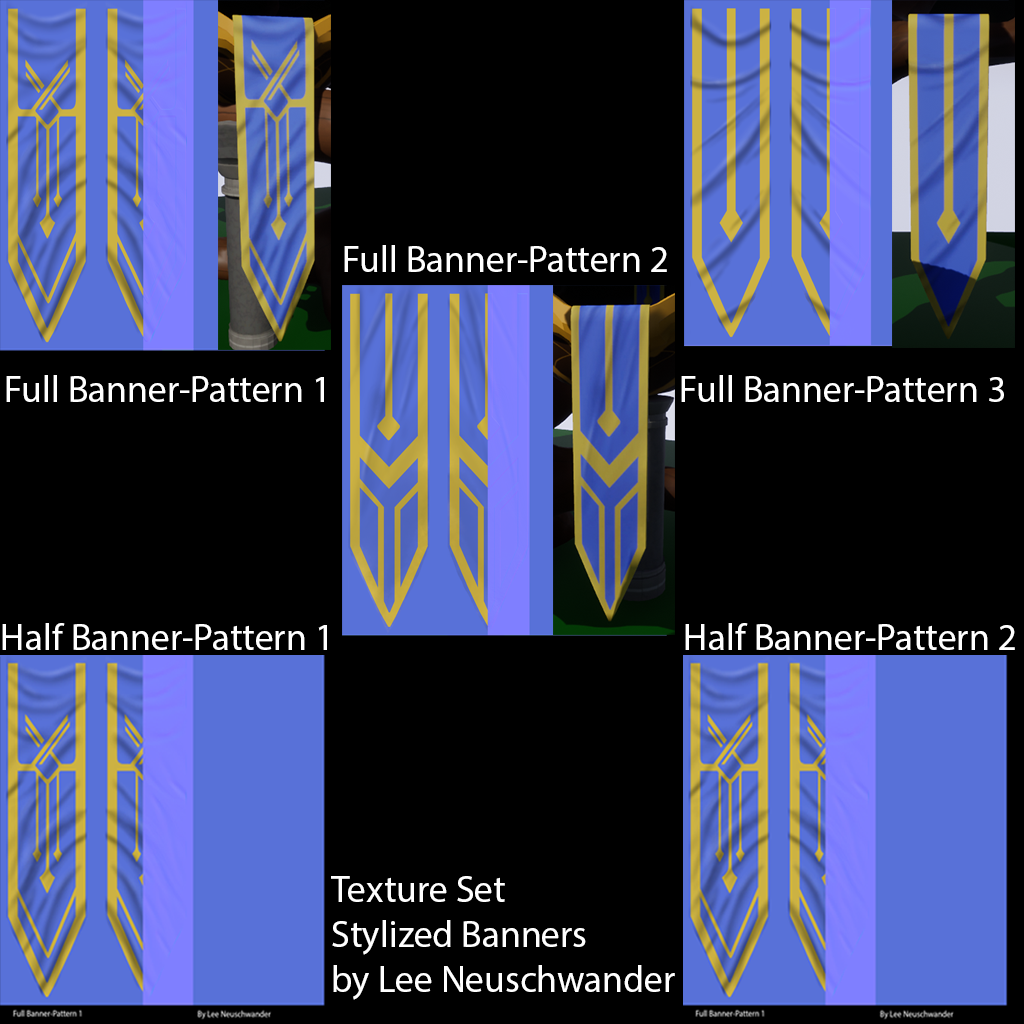
<style>
.page{position:relative;width:1024px;height:1024px;background:#000000}
.page>*{position:absolute;margin:0}
.t1{font:37.5px "MyriadPro-Regular";color:#ffffff}
</style>
<div class="page">
<p class="t1" style="left:344px;top:245px;width:323px;height:27px">Full Banner-Pattern 2</p>
<p class="t1" style="left:6px;top:375px;width:318px;height:27px">Full Banner-Pattern 1</p>
<p class="t1" style="left:681px;top:375px;width:323px;height:27px">Full Banner-Pattern 3</p>
<p class="t1" style="left:2px;top:623px;width:325px;height:27px">Half Banner-Pattern 1</p>
<p class="t1" style="left:685px;top:623px;width:330px;height:27px">Half Banner-Pattern 2</p>
<p class="t1" style="left:331px;top:876px;width:344px;height:124px">Texture Set<br>Stylized Banners<br>by Lee Neuschwander</p>
</div>
